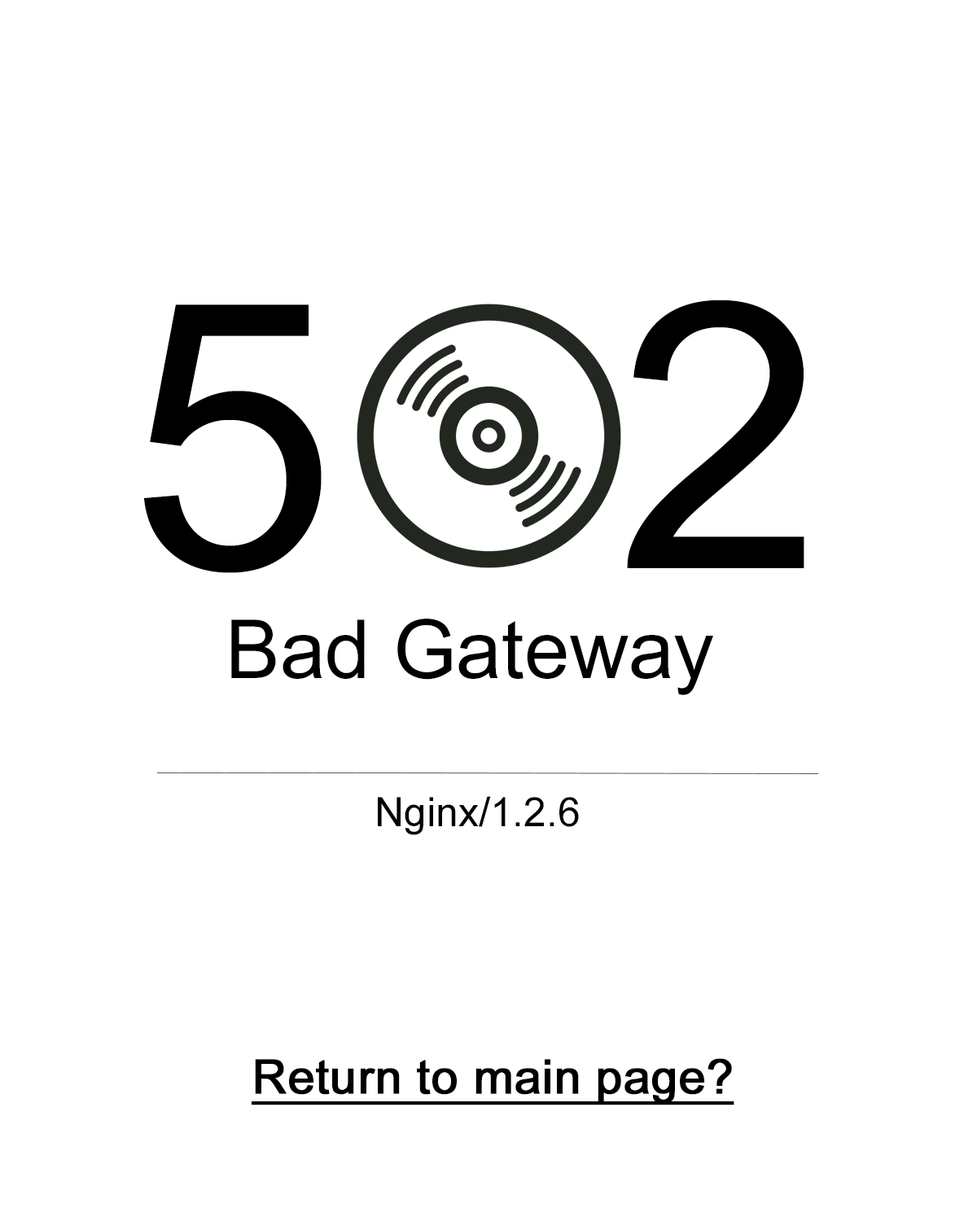
<style>
.page{position:relative;width:977px;height:1221px;background:#ffffff}
.page>*{position:absolute;margin:0}
.t1{font:373px "ArialMT";color:#000000}
.t2{font:81.4px "ArialMT";color:#000000}
.t3{font:40.7px "ArialMT";color:#000000}
.t4{font:47.5px "ArialMT";color:#000000;font-weight:bold;text-decoration:underline}
</style>
<div class="page">
<p class="t1" style="left:144px;top:304px;width:177px;height:269px">5</p>
<p class="t1" style="left:627px;top:300px;width:177px;height:268px">2</p>
<p class="t2" style="left:231px;top:619px;width:482px;height:76px">Bad Gateway</p>
<p class="t3" style="left:378px;top:796px;width:201px;height:39px">Nginx/1.2.6</p>
<p class="t4" style="left:252px;top:1058px;width:482px;height:47px">Return to main page?</p>
</div>
